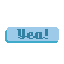
<style>
.page{position:relative;width:64px;height:64px;background:#ffffff}
.page>*{position:absolute;margin:0}
.t1{font:14px "Superscript";color:#3281a2}
</style>
<div class="page">
<p class="t1" style="left:17px;top:29px;width:31px;height:10px">Yea!</p>
</div>
